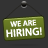
<style>
.page{position:relative;width:48px;height:48px;background:#333333}
.page>*{position:absolute;margin:0}
.t1{font:10.8px/10px "MyriadPro-Semibold";color:#ffffff}
.t2{font:7.8px "MyriadPro-Semibold";color:#ffffff}
</style>
<div class="page">
<p class="t1" style="left:6px;top:19px;width:36px;height:19px;text-align:center;rotate:-4deg"><span class="t2">WE ARE<br></span>HIRING!</p>
</div>
